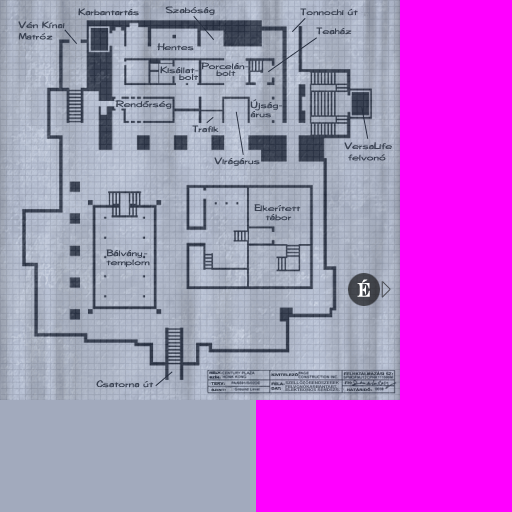
<style>
.page{position:relative;width:512px;height:512px;background:#ff00ff}
.page>*{position:absolute;margin:0}
.t1{font:9.1px "DiegoCE";color:#3a4252;scale:1.4 1}
.t2{font:9.1px/11.4px "Diego-Regular";color:#3a4252;scale:1.4 1}
.t3{font:9.1px/6.8px "DiegoCE";color:#3a4252;scale:1.4 1}
.t4{font:9.1px/9.1px "DiegoCE";color:#3a4252;scale:1.4 1}
.t5{font:9.1px/11.4px "DiegoCE";color:#3a4252;scale:1.4 1}
.t6{font:19.5px "EngraversCE";color:#ffffff;font-weight:bold;scale:0.81 1}
.t7{font:2.8px/4.5px "Arial-BoldMT";color:#31394a;font-weight:bold;scale:1.46 1}
.t8{font:3.2px "Arial-BoldMT";color:#3a4250;font-weight:bold;scale:1.37 1}
.t9{font:3.1px "Arial-BoldMT";color:#3a4250;font-weight:bold;scale:1.41 1}
.t10{font:3.9px "Arial-BoldMT";color:#3a4250;font-weight:bold;scale:1.13 1}
.t11{font:3.2px/4.5px "Arial-BoldMT";color:#3a4250;font-weight:bold;scale:1.37 1}
.t12{font:3.9px/3.4px "Arial-BoldMT";color:#4f5665;scale:1.13 1}
</style>
<div class="page">
<p class="t1" style="left:165px;top:6px;width:50px;height:9px">Szabóság</p>
<p class="t1" style="left:78px;top:8px;width:61px;height:8px">Karbantartás</p>
<p class="t1" style="left:300px;top:8px;width:58px;height:8px">Tonnochi út</p>
<p class="t2" style="left:18px;top:21px;width:47px;height:19px">Vén Kínai<br>Matróz</p>
<p class="t1" style="left:316px;top:27px;width:36px;height:8px">Teaház</p>
<p class="t1" style="left:157px;top:43px;width:37px;height:8px">Hentes</p>
<p class="t3" style="left:201px;top:62px;width:48px;height:14px">Porcelán-<br>    bolt</p>
<p class="t3" style="left:160px;top:66px;width:39px;height:14px">Kisállat-<br>     bolt</p>
<p class="t1" style="left:115px;top:100px;width:57px;height:9px">Rendőrség</p>
<p class="t4" style="left:250px;top:99px;width:33px;height:19px">Újság-<br>árus</p>
<p class="t1" style="left:192px;top:125px;width:27px;height:8px">Trafik</p>
<p class="t5" style="left:344px;top:142px;width:48px;height:19px">VersaLife<br> felvonó</p>
<p class="t1" style="left:214px;top:157px;width:46px;height:9px">Virágárus</p>
<p class="t4" style="left:254px;top:204px;width:47px;height:17px">Elkerített<br>   tábor</p>
<p class="t4" style="left:106px;top:249px;width:44px;height:18px">Bálvány-<br>templom</p>
<p class="t6" style="left:357px;top:279px;width:13px;height:18px">É</p>
<p class="t7" style="left:209px;top:371px;width:13px;height:8px">HELY-<br>SZÍN:</p>
<p class="t8" style="left:271px;top:373px;width:29px;height:4px">KIVITELEZŐ:</p>
<p class="t8" style="left:343px;top:371px;width:50px;height:5px">FELHATALMAZÁSI SZ:</p>
<p class="t1" style="left:96px;top:380px;width:58px;height:8px">Csatorna út</p>
<p class="t9" style="left:211px;top:388px;width:15px;height:4px">SZINT:</p>
<p class="t10" style="left:211px;top:382px;width:14px;height:3px">TERV:</p>
<p class="t11" style="left:271px;top:382px;width:14px;height:8px">FELA-<br>DAT:</p>
<p class="t12" style="left:285px;top:380px;width:55px;height:11px">SZELLŐZŐRENDSZEREK<br>FELVONÓKARBANTART.<br>ELEKTROMOS RENDSZR.</p>
<p class="t8" style="left:344px;top:381px;width:9px;height:4px">FH:</p>
<p class="t8" style="left:347px;top:387px;width:25px;height:4px">HATÁRIDŐ:</p>
</div>
